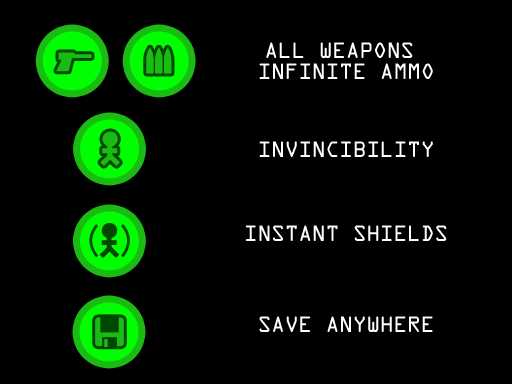
<style>
.page{position:relative;width:512px;height:384px;background:#000000}
.page>*{position:absolute;margin:0}
.t1{font:20px/21px "OCRAStd";letter-spacing:-0.04em;color:#ffffff;text-transform:uppercase}
.t2{font:20px "OCRAStd";letter-spacing:-0.04em;color:#ffffff;text-transform:uppercase}
</style>
<div class="page">
<p class="t1" style="left:259px;top:42px;width:174px;height:37px;text-align:center">All Weapons <br>Infinite ammo</p>
<p class="t2" style="left:259px;top:141px;width:174px;height:16px">Invincibility</p>
<p class="t2" style="left:245px;top:225px;width:202px;height:16px">Instant Shields</p>
<p class="t2" style="left:259px;top:316px;width:174px;height:16px">Save Anywhere</p>
</div>
